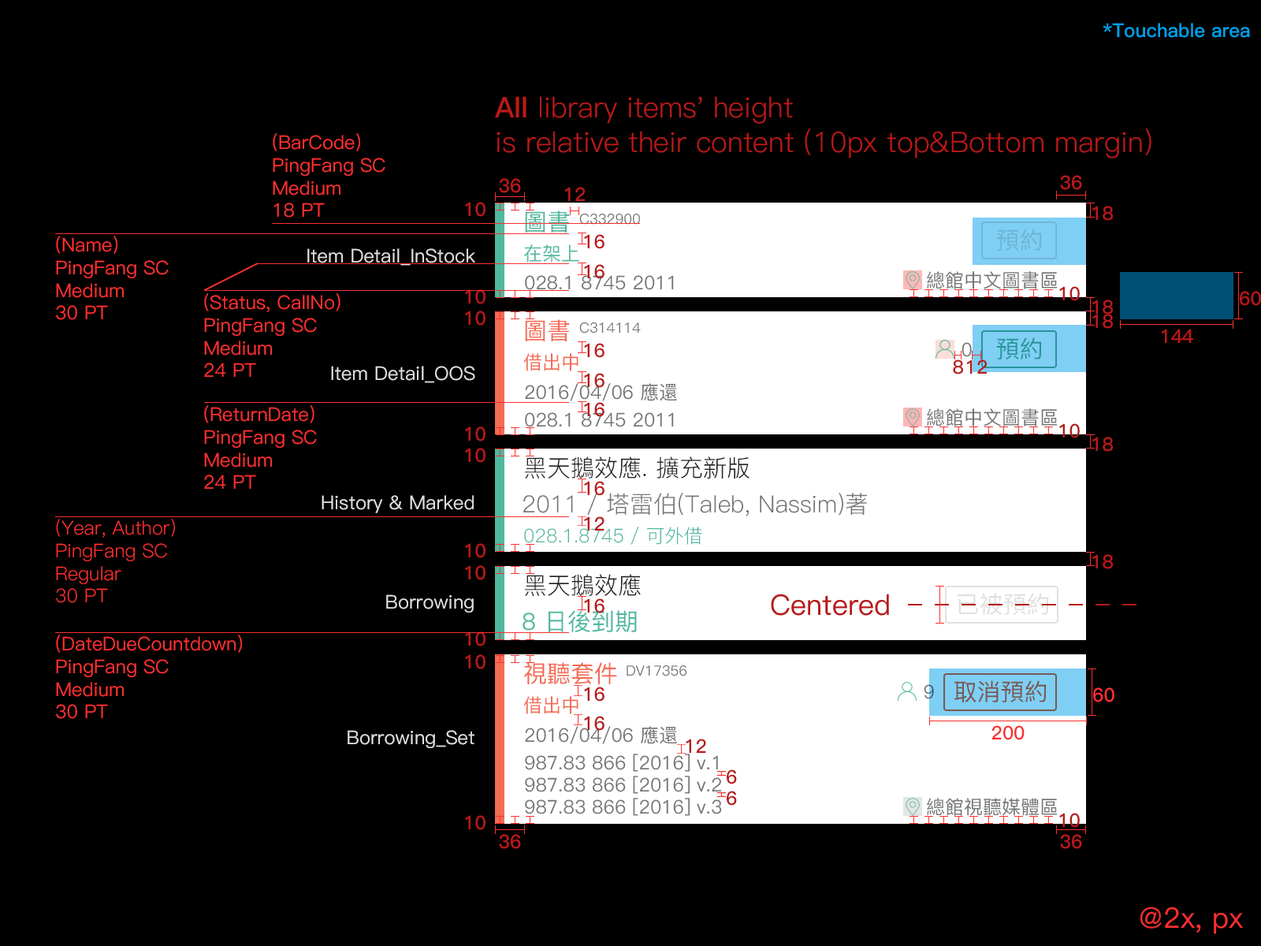
<style>
.page{position:relative;width:1261px;height:946px;background:#000000}
.page>*{position:absolute;margin:0}
.t1{font:18.9px "PingFang-SC-Bold";color:#00a0e9}
.t2{font:28.4px "PingFang-SC-Regular";color:#b71a1a}
.t3{font:28.4px "PingFang-SC-Bold";color:#b71a1a}
.t4{font:18.9px "PingFang-SC-Medium";color:#f83030}
.t5{font:18.9px "PingFang-SC-Bold";color:#b71a1a}
.t6{font:23.6px "PingFang-SC-Medium";color:#4fb89f}
.t7{font:14.2px "PingFang-SC-Medium";color:#757575}
.t8{font:23.6px "PingFang-SC-Medium";color:#6fb4d4}
.t9{font:18.9px "PingFang-SC-Medium";color:#4fb89f}
.t10{font:18.9px "PingFang-SC-Medium";color:#dfdfdf}
.t11{font:18.9px "PingFang-SC-Medium";color:#757575}
.t12{font:23.6px "PingFang-SC-Medium";color:#f36c56}
.t13{font:23.6px "PingFang-SC-Medium";color:#279598}
.t14{font:18.9px "PingFang-SC-Medium";color:#f36c56}
.t15{font:23.6px "PingFang-SC-Regular";color:#212121}
.t16{font:23.6px "PingFang-SC-Regular";color:#757575}
.t17{font:18.9px "PingFang-SC-Regular";color:#f83030}
.t18{font:18.9px "PingFang-SC-Regular";color:#4fb89f}
.t19{font:23.6px "PingFang-SC-Medium";color:#e0e0e0}
.t20{font:18.9px "PingFang-SC-Medium"}
.t21{font:23.6px "PingFang-SC-Medium";color:#795852}
.t22{font:18.9px "PingFang-SC-Bold";color:#f83030}
.t23{font:28.4px "PingFang-SC-Medium";color:#f83030}
</style>
<div class="page">
<p class="t1" style="left:1103px;top:23px;width:147px;height:15px">*Touchable area</p>
<p class="t2" style="left:495px;top:96px;width:656px;height:62px"><span class="t3">All</span> library items' height<br>is relative their content (10px top&amp;Bottom margin)</p>
<p class="t4" style="left:273px;top:133px;width:112px;height:85px">(BarCode)<br>PingFang SC<br>Medium<br>18 PT</p>
<p class="t5" style="left:499px;top:178px;width:22px;height:15px">36</p>
<p class="t5" style="left:1060px;top:175px;width:22px;height:15px">36</p>
<p class="t5" style="left:565px;top:187px;width:20px;height:14px">12</p>
<p class="t5" style="left:465px;top:202px;width:20px;height:15px">10</p>
<p class="t5" style="left:1092px;top:206px;width:21px;height:15px">18</p>
<p class="t6" style="left:525px;top:210px;width:45px;height:22px">圖書</p>
<p class="t7" style="left:579px;top:214px;width:61px;height:11px">C332900</p>
<p class="t8" style="left:996px;top:229px;width:46px;height:22px">預約</p>
<p class="t4" style="left:56px;top:236px;width:113px;height:84px">(Name)<br>PingFang SC<br>Medium<br>30 PT</p>
<p class="t9" style="left:523px;top:244px;width:56px;height:18px">在架上</p>
<p class="t5" style="left:584px;top:234px;width:20px;height:15px">16</p>
<p class="t10" style="left:307px;top:248px;width:168px;height:18px">Item Detail_InStock</p>
<p class="t5" style="left:584px;top:264px;width:20px;height:15px">16</p>
<p class="t11" style="left:525px;top:275px;width:149px;height:15px">028.1 8745 2011</p>
<p class="t11" style="left:927px;top:271px;width:131px;height:18px">總館中文圖書區</p>
<p class="t4" style="left:204px;top:293px;width:136px;height:84px">(Status, CallNo)<br>PingFang SC<br>Medium<br>24 PT</p>
<p class="t5" style="left:465px;top:289px;width:20px;height:15px">10</p>
<p class="t5" style="left:1059px;top:286px;width:21px;height:15px">10</p>
<p class="t5" style="left:1240px;top:291px;width:21px;height:15px">60</p>
<p class="t5" style="left:1092px;top:299px;width:21px;height:15px">18</p>
<p class="t5" style="left:465px;top:311px;width:20px;height:14px">10</p>
<p class="t5" style="left:1092px;top:314px;width:21px;height:15px">18</p>
<p class="t12" style="left:525px;top:319px;width:45px;height:22px">圖書</p>
<p class="t7" style="left:579px;top:322px;width:62px;height:11px">C314114</p>
<p class="t5" style="left:1162px;top:329px;width:31px;height:14px">144</p>
<p class="t13" style="left:996px;top:337px;width:46px;height:22px">預約</p>
<p class="t14" style="left:524px;top:353px;width:54px;height:18px">借出中</p>
<p class="t5" style="left:584px;top:343px;width:20px;height:15px">16</p>
<p class="t11" style="left:961px;top:342px;width:11px;height:15px">0</p>
<p class="t10" style="left:331px;top:366px;width:144px;height:17px">Item Detail_OOS</p>
<p class="t5" style="left:953px;top:359px;width:10px;height:15px">8</p>
<p class="t5" style="left:967px;top:359px;width:20px;height:15px">12</p>
<p class="t5" style="left:584px;top:373px;width:20px;height:15px">16</p>
<p class="t11" style="left:525px;top:383px;width:152px;height:18px">2016/04/06 應還</p>
<p class="t5" style="left:584px;top:402px;width:20px;height:15px">16</p>
<p class="t4" style="left:204px;top:405px;width:113px;height:84px">(ReturnDate)<br>PingFang SC<br>Medium<br>24 PT</p>
<p class="t11" style="left:525px;top:412px;width:149px;height:15px">028.1 8745 2011</p>
<p class="t11" style="left:927px;top:408px;width:131px;height:18px">總館中文圖書區</p>
<p class="t5" style="left:1059px;top:423px;width:21px;height:15px">10</p>
<p class="t5" style="left:465px;top:426px;width:20px;height:15px">10</p>
<p class="t5" style="left:1092px;top:437px;width:21px;height:15px">18</p>
<p class="t5" style="left:465px;top:448px;width:20px;height:15px">10</p>
<p class="t15" style="left:525px;top:456px;width:224px;height:22px">黑天鵝效應. 擴充新版</p>
<p class="t5" style="left:584px;top:481px;width:20px;height:15px">16</p>
<p class="t10" style="left:322px;top:495px;width:152px;height:18px">History &amp; Marked</p>
<p class="t16" style="left:523px;top:493px;width:344px;height:23px">2011 / 塔雷伯(Taleb, Nassim)著</p>
<p class="t17" style="left:56px;top:519px;width:119px;height:84px">(Year, Author)<br>PingFang SC<br>Regular<br>30 PT</p>
<p class="t5" style="left:584px;top:516px;width:20px;height:14px">12</p>
<p class="t18" style="left:524px;top:526px;width:178px;height:19px">028.1.8745 / 可外借</p>
<p class="t5" style="left:465px;top:543px;width:20px;height:15px">10</p>
<p class="t5" style="left:1092px;top:554px;width:21px;height:15px">18</p>
<p class="t5" style="left:465px;top:565px;width:20px;height:15px">10</p>
<p class="t15" style="left:525px;top:574px;width:116px;height:22px">黑天鵝效應</p>
<p class="t19" style="left:958px;top:593px;width:91px;height:22px">已被預約</p>
<p class="t10" style="left:386px;top:594px;width:88px;height:18px">Borrowing</p>
<p class="t5" style="left:584px;top:598px;width:20px;height:15px">16</p>
<p class="t6" style="left:522px;top:610px;width:115px;height:22px">8 日後到期</p>
<p class="t4" style="left:56px;top:634px;width:186px;height:85px">(DateDueCountdown)<br>PingFang SC<br>Medium<br>30 PT</p>
<p class="t5" style="left:465px;top:631px;width:20px;height:15px">10</p>
<p class="t5" style="left:465px;top:654px;width:20px;height:15px">10</p>
<p class="t12" style="left:524px;top:662px;width:93px;height:22px">視聽套件</p>
<p class="t7" style="left:627px;top:665px;width:60px;height:11px">DV17356</p>
<p class="t5" style="left:584px;top:686px;width:20px;height:15px">16</p>
<p class="t20" style="left:924px;top:684px;width:10px;height:15px">9</p>
<p class="t21" style="left:954px;top:680px;width:93px;height:22px">取消預約</p>
<p class="t22" style="left:1093px;top:687px;width:21px;height:15px">60</p>
<p class="t14" style="left:524px;top:696px;width:54px;height:18px">借出中</p>
<p class="t11" style="left:525px;top:726px;width:152px;height:18px">2016/04/06 應還</p>
<p class="t5" style="left:584px;top:716px;width:20px;height:15px">16</p>
<p class="t22" style="left:991px;top:725px;width:33px;height:15px">200</p>
<p class="t10" style="left:348px;top:730px;width:126px;height:18px">Borrowing_Set</p>
<p class="t5" style="left:686px;top:738px;width:20px;height:15px">12</p>
<p class="t11" style="left:525px;top:753px;width:193px;height:19px">987.83 866 [2016] v.1</p>
<p class="t5" style="left:727px;top:769px;width:10px;height:15px">6</p>
<p class="t11" style="left:525px;top:775px;width:196px;height:19px">987.83 866 [2016] v.2</p>
<p class="t11" style="left:525px;top:798px;width:197px;height:18px">987.83 866 [2016] v.3</p>
<p class="t5" style="left:727px;top:790px;width:10px;height:15px">6</p>
<p class="t11" style="left:927px;top:798px;width:131px;height:18px">總館視聽媒體區</p>
<p class="t5" style="left:465px;top:815px;width:20px;height:15px">10</p>
<p class="t5" style="left:1059px;top:813px;width:21px;height:14px">10</p>
<p class="t5" style="left:499px;top:834px;width:22px;height:15px">36</p>
<p class="t5" style="left:1060px;top:834px;width:22px;height:15px">36</p>
<p class="t23" style="left:1140px;top:906px;width:103px;height:28px">@2x, px</p>
</div>
